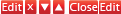
<style>
.page{position:relative;width:121px;height:14px}
.page>*{position:absolute;margin:0}
.t1{font:11px "LucidaGrande";color:#ffffff}
.t2{font:11px "LucidaGrande";letter-spacing:-0.02em;color:#ffffff}
</style>
<div class="page">
<p class="t1" style="left:2px;top:3px;width:20px;height:8px">Edit</p>
<p class="t1" style="left:27px;top:4px;width:7px;height:6px">x</p>
<p class="t2" style="left:70px;top:3px;width:28px;height:8px">Close</p>
<p class="t1" style="left:100px;top:3px;width:20px;height:8px">Edit</p>
</div>
